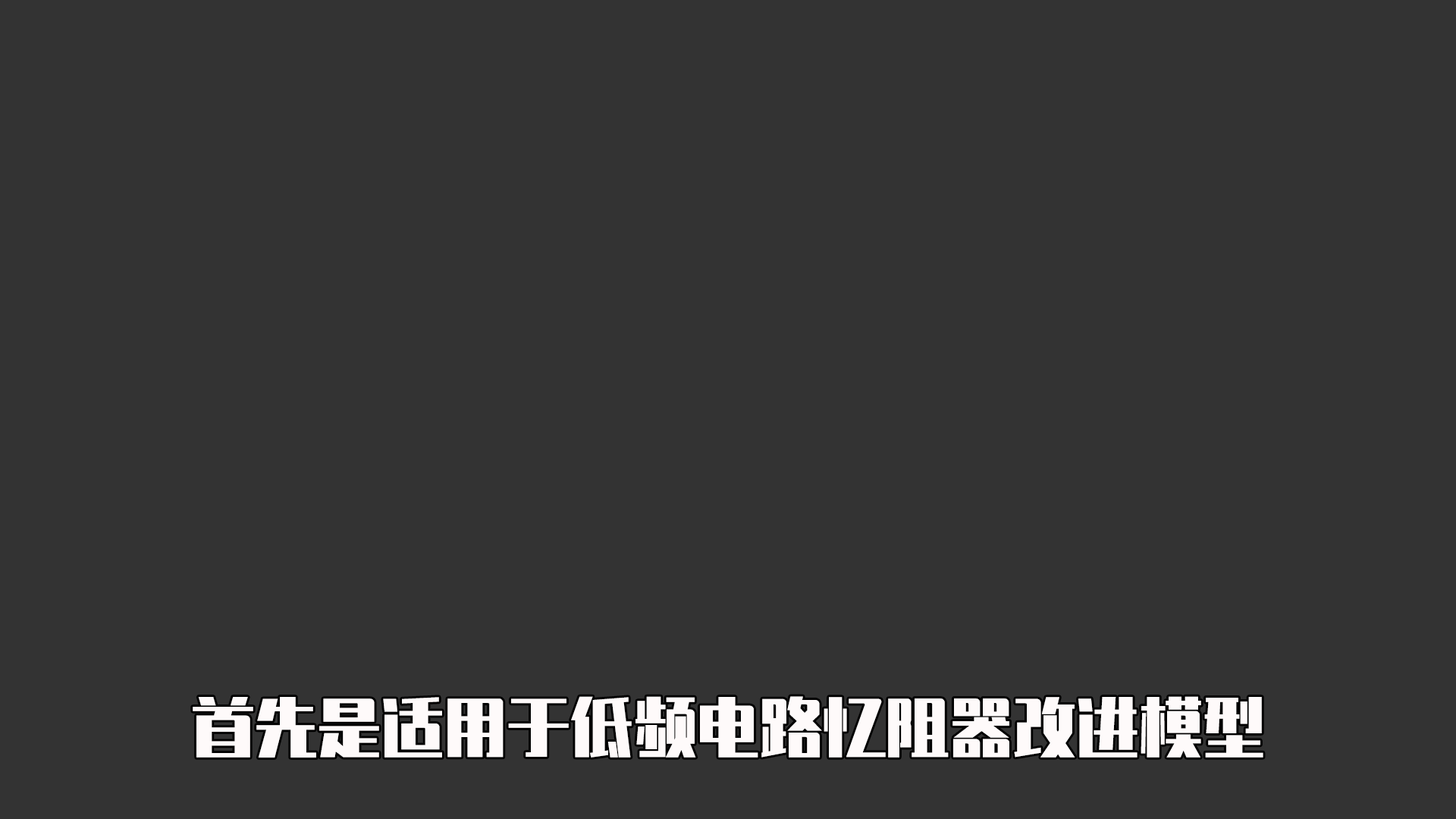
<style>
.page{position:relative;width:1456px;height:819px;background:#333333}
.page>*{position:absolute;margin:0}
.t1{font:63.2px "ZhenyanGB-Regular";color:#fefafa}
</style>
<div class="page">
<p class="t1" style="left:193px;top:696px;width:1070px;height:62px">首先是适用于低频电路忆阻器改进模型</p>
</div>
